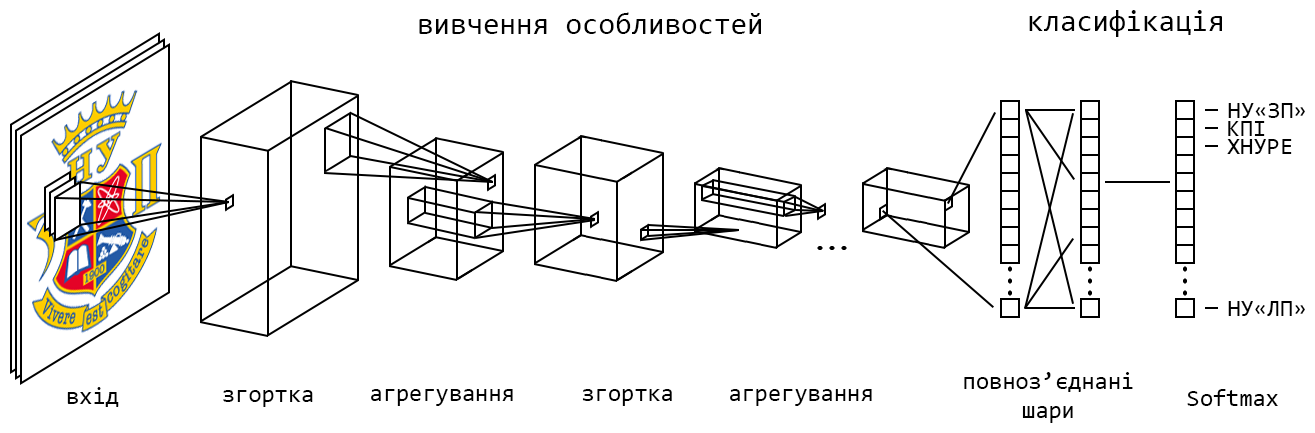
<style>
.page{position:relative;width:1315px;height:433px;background:#ffffff}
.page>*{position:absolute;margin:0}
.t1{font:30px "Consolas";color:#000000}
.t2{font:24px "Consolas";color:#000000}
</style>
<div class="page">
<p class="t1" style="left:419px;top:12px;width:342px;height:22px">вивчення особливостей</p>
<p class="t1" style="left:1029px;top:10px;width:193px;height:27px">класифікація</p>
<p class="t2" style="left:1228px;top:103px;width:77px;height:15px">НУ«ЗП»</p>
<p class="t2" style="left:1228px;top:121px;width:37px;height:15px">КПІ</p>
<p class="t2" style="left:1227px;top:139px;width:65px;height:15px">ХНУРЕ</p>
<p class="t2" style="left:1228px;top:301px;width:77px;height:15px">НУ«ЛП»</p>
<p class="t2" style="left:964px;top:372px;width:169px;height:51px;text-align:center">повноз’єднані<br>шари</p>
<p class="t2" style="left:67px;top:387px;width:52px;height:20px">вхід</p>
<p class="t2" style="left:223px;top:390px;width:90px;height:17px">згортка</p>
<p class="t2" style="left:371px;top:389px;width:142px;height:17px">агрегування</p>
<p class="t2" style="left:582px;top:389px;width:90px;height:17px">згортка</p>
<p class="t2" style="left:730px;top:389px;width:142px;height:17px">агрегування</p>
<p class="t2" style="left:1187px;top:389px;width:91px;height:17px">Softmax</p>
</div>
